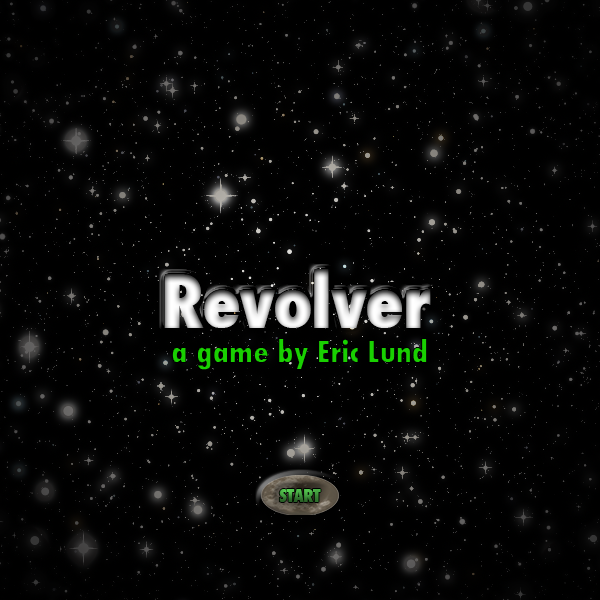
<style>
.page{position:relative;width:600px;height:600px;background:#000000}
.page>*{position:absolute;margin:0}
.t1{font:72px "Futura-CondensedExtraBold";letter-spacing:-0.02em}
.t2{font:30px "Futura-CondensedExtraBold";letter-spacing:-0.02em}
.t3{font:24px "Futura-CondensedExtraBold";letter-spacing:-0.02em;font-variant:small-caps}
</style>
<div class="page">
<p class="t1" style="left:164px;top:269px;width:267px;height:59px">Revolver</p>
<p class="t2" style="left:171px;top:338px;width:257px;height:33px">a game by Eric Lund</p>
<p class="t3" style="left:279px;top:489px;width:42px;height:13px">start</p>
</div>
